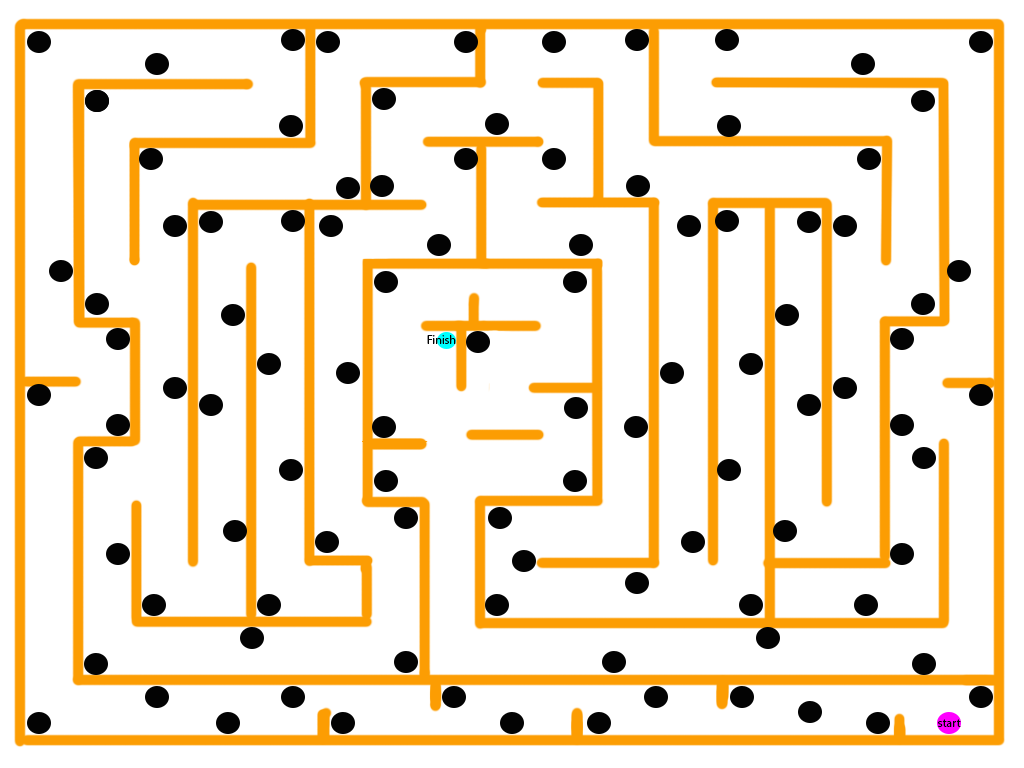
<style>
.page{position:relative;width:1024px;height:768px;background:#ffffff}
.page>*{position:absolute;margin:0}
.t1{font:12px "MyriadPro-Regular";color:#030303}
</style>
<div class="page">
<p class="t1" style="left:427px;top:335px;width:29px;height:9px">Finish</p>
<p class="t1" style="left:937px;top:719px;width:24px;height:8px">start</p>
</div>
